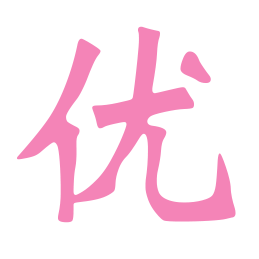
<style>
.page{position:relative;width:259px;height:259px;background:#ffffff}
.page>*{position:absolute;margin:0}
.t1{font:250px "STXinwei";color:#f484b7}
</style>
<div class="page">
<p class="t1" style="left:17px;top:26px;width:219px;height:197px">优</p>
</div>
